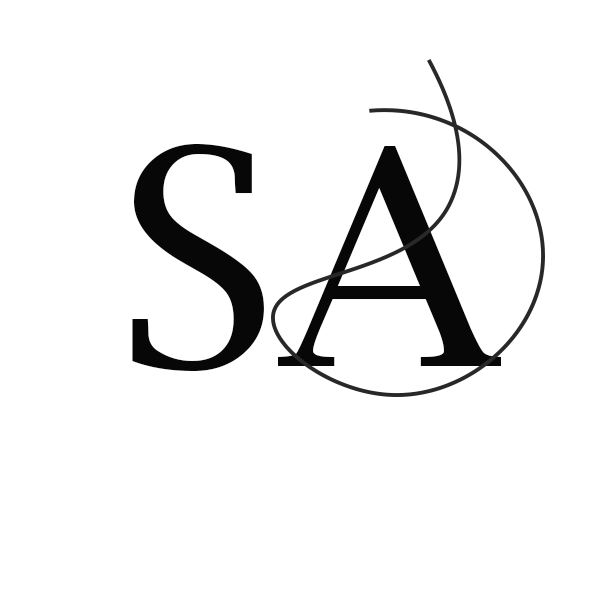
<style>
.page{position:relative;width:600px;height:600px;background:#ffffff}
.page>*{position:absolute;margin:0}
.t1{font:300px "LucidaBright";color:#070707}
</style>
<div class="page">
<p class="t1" style="left:132px;top:144px;width:369px;height:227px">SA</p>
</div>
